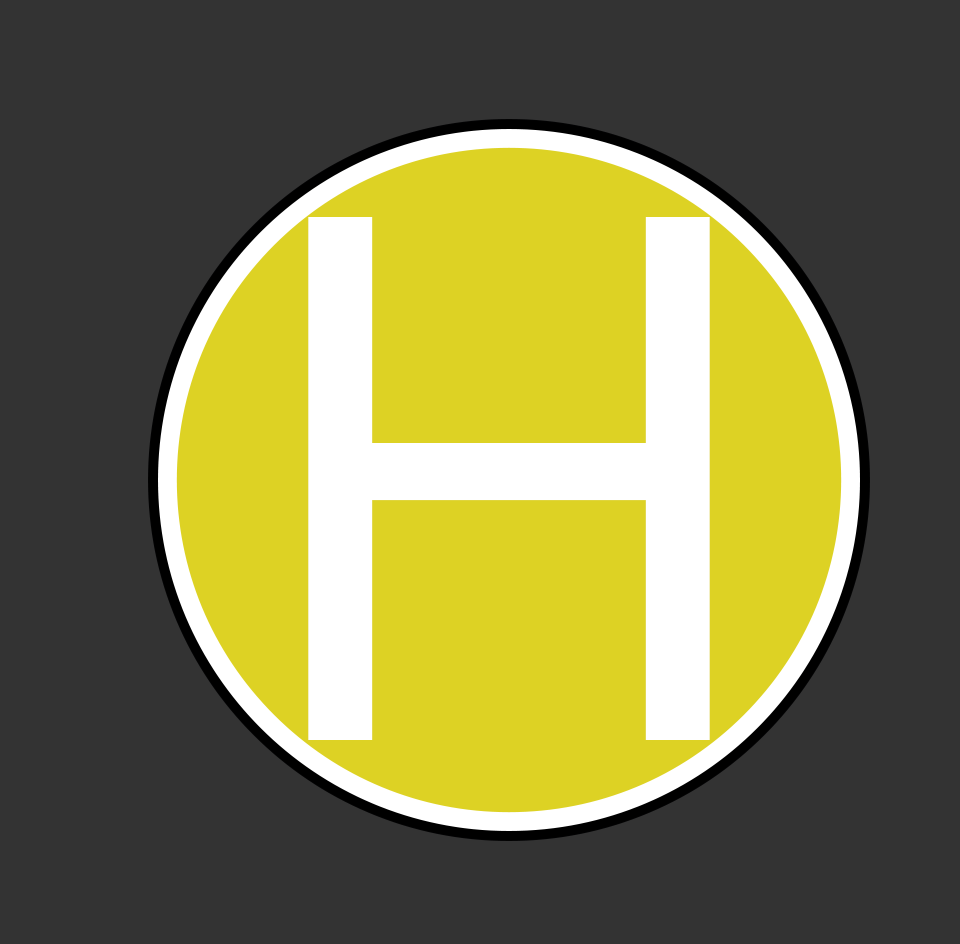
<style>
.page{position:relative;width:960px;height:944px;background:#333333}
.page>*{position:absolute;margin:0}
.t1{font:800px "Corbel";color:#ffffff}
</style>
<div class="page">
<p class="t1" style="left:308px;top:217px;width:402px;height:523px">H</p>
</div>
